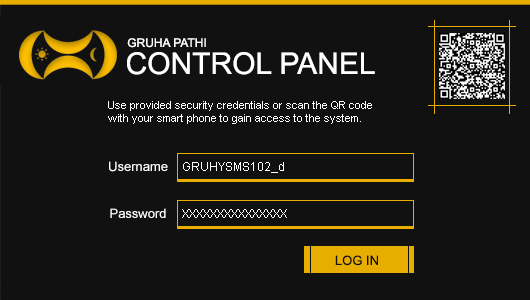
<style>
.page{position:relative;width:530px;height:300px;background:#111111}
.page>*{position:absolute;margin:0}
.t1{font:12px "ArialMT";color:#ffffff}
.t2{font:30px "ArialMT";color:#ffffff}
.t3{font:11px "ArialMT";color:#ffffff}
.t4{font:13px "ArialMT";color:#ffffff}
.t5{font:13px "ArialMT";color:#111111}
</style>
<div class="page">
<p class="t1" style="left:127px;top:38px;width:79px;height:10px">GRUHA PATHI</p>
<p class="t2" style="left:127px;top:52px;width:248px;height:23px">CONTROL PANEL</p>
<p class="t3" style="left:108px;top:101px;width:264px;height:23px">Use provided security credentials or scan the QR code <br>with your smart phone to gain access to the system.</p>
<p class="t4" style="left:109px;top:161px;width:59px;height:11px">Username</p>
<p class="t1" style="left:183px;top:162px;width:101px;height:11px">GRUHYSMS102_d</p>
<p class="t4" style="left:110px;top:208px;width:56px;height:10px">Password</p>
<p class="t1" style="left:182px;top:209px;width:105px;height:9px">XXXXXXXXXXXXXXX</p>
<p class="t5" style="left:335px;top:255px;width:43px;height:11px">LOG IN</p>
</div>
